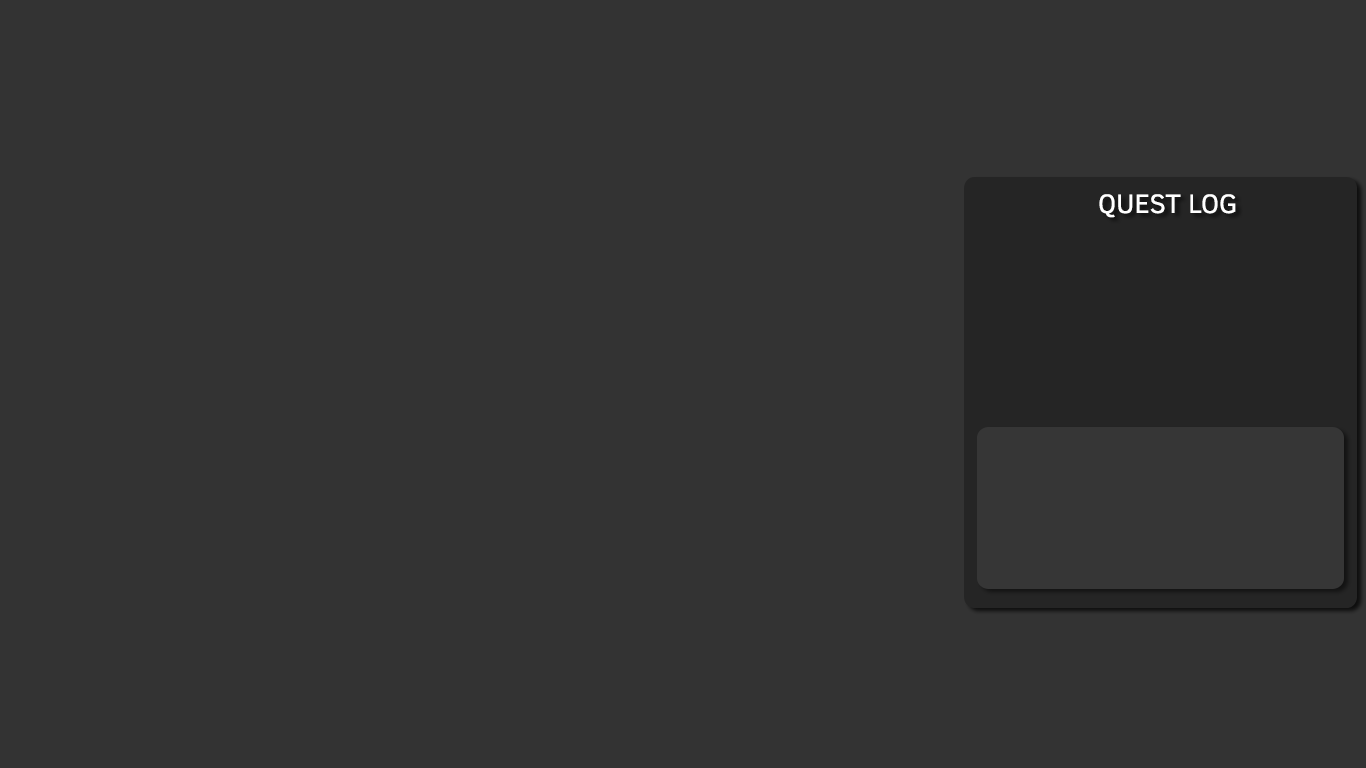
<style>
.page{position:relative;width:1366px;height:768px;background:#333333}
.page>*{position:absolute;margin:0}
.t1{font:27px "ClearSans";color:#ffffff}
</style>
<div class="page">
<p class="t1" style="left:1099px;top:194px;width:137px;height:24px">QUEST LOG</p>
</div>
